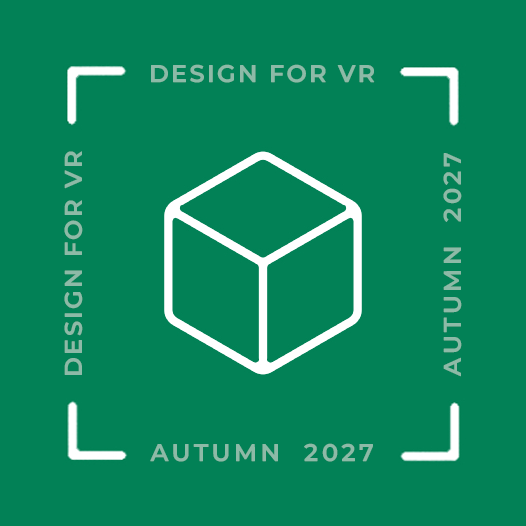
<style>
.page{position:relative;width:526px;height:526px;background:#028156}
.page>*{position:absolute;margin:0}
.t1{font:24px "Montserrat-SemiBold";letter-spacing:0.1em;color:#8dbaa7}
.t2{font:24px "Montserrat-SemiBold";letter-spacing:0.15em;color:#8dbaa7}
</style>
<div class="page">
<p class="t1" style="left:151px;top:64px;width:224px;height:19px">DESIGN FOR VR</p>
<p class="t1" style="left:64px;top:151px;width:19px;height:224px;rotate:-90deg">DESIGN FOR VR</p>
<p class="t2" style="left:443px;top:153px;width:19px;height:224px;rotate:-90deg">AUTUMN  2027</p>
<p class="t2" style="left:150px;top:443px;width:223px;height:19px">AUTUMN  2027</p>
</div>
